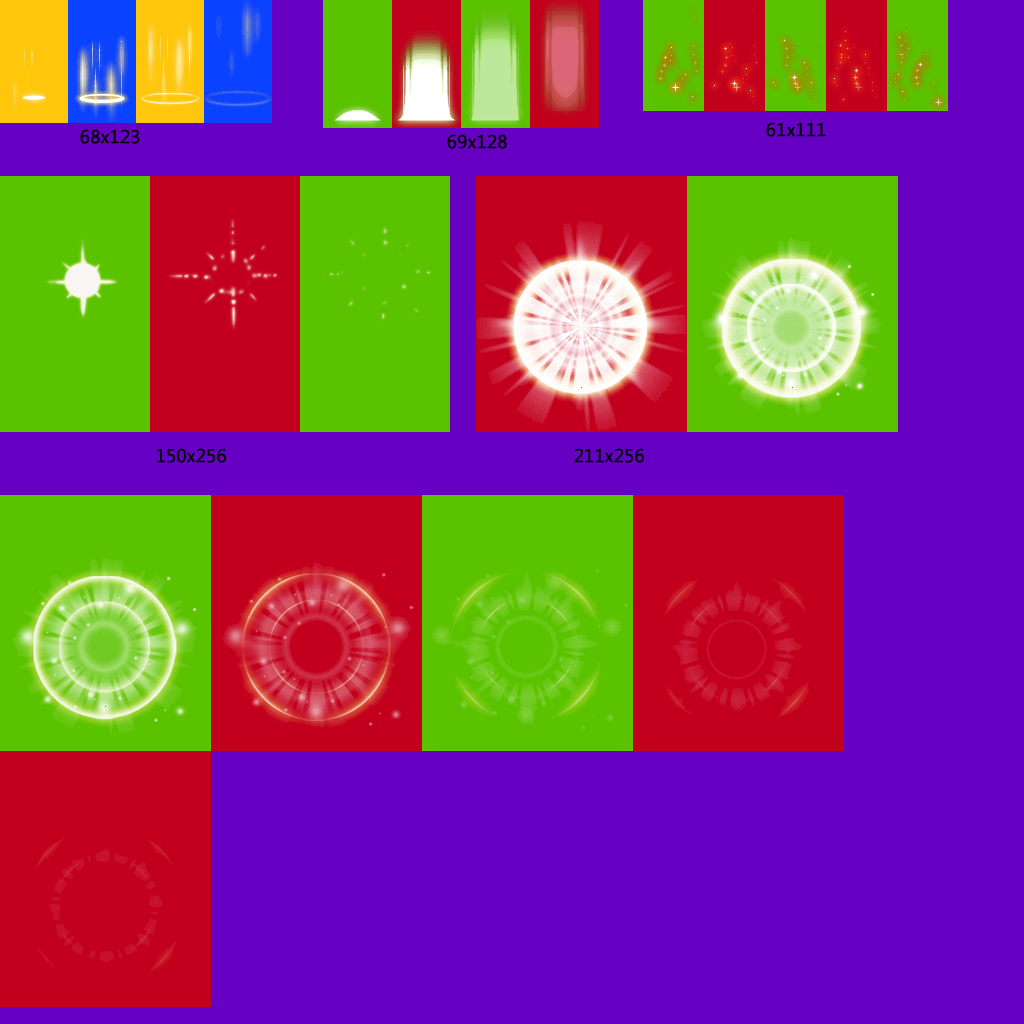
<style>
.page{position:relative;width:1024px;height:1024px;background:#6600c2}
.page>*{position:absolute;margin:0}
.t1{font:18px "MalgunGothicRegular";color:#000000;font-weight:bold}
</style>
<div class="page">
<p class="t1" style="left:766px;top:122px;width:60px;height:15px">61x111</p>
<p class="t1" style="left:80px;top:129px;width:60px;height:15px">68x123</p>
<p class="t1" style="left:447px;top:134px;width:60px;height:15px">69x128</p>
<p class="t1" style="left:157px;top:448px;width:69px;height:15px">150x256</p>
<p class="t1" style="left:574px;top:448px;width:70px;height:15px">211x256</p>
</div>
